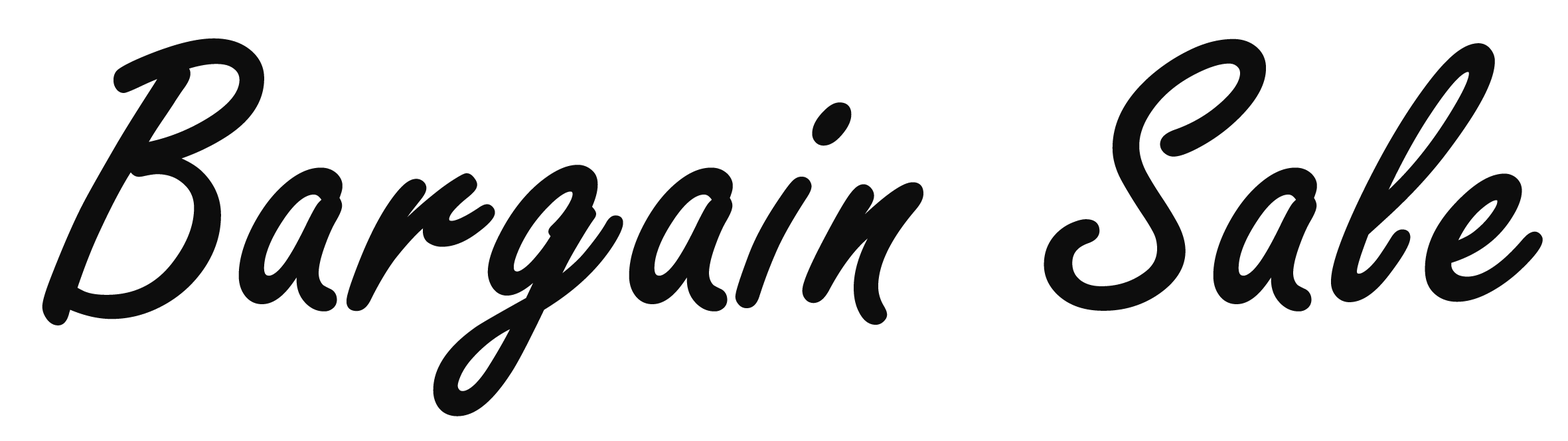
<style>
.page{position:relative;width:1568px;height:441px;background:#ffffff}
.page>*{position:absolute;margin:0}
.t1{font:409.4px "FreestyleScript-Regular";color:#0d0d0d;font-weight:bold}
</style>
<div class="page">
<p class="t1" style="left:42px;top:38px;width:1501px;height:378px">Bargain Sale</p>
</div>
